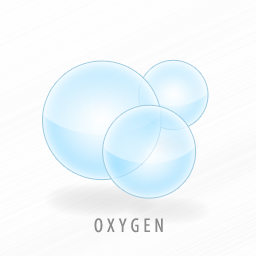
<style>
.page{position:relative;width:256px;height:256px;background:#fdfdfd}
.page>*{position:absolute;margin:0}
.t1{font:20px "MyriadPro-Cond";letter-spacing:0.2em;color:#8b8b8b;text-transform:uppercase}
</style>
<div class="page">
<p class="t1" style="left:94px;top:218px;width:69px;height:15px">Oxygen</p>
</div>
